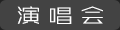
<style>
.page{position:relative;width:120px;height:30px;background:#434343}
.page>*{position:absolute;margin:0}
.t1{font:20.8px "ZHSRXT--GBK1-0";color:#ffffff;scale:1.2 1}
</style>
<div class="page">
<p class="t1" style="left:17px;top:6px;width:86px;height:18px">演 唱 会</p>
</div>
